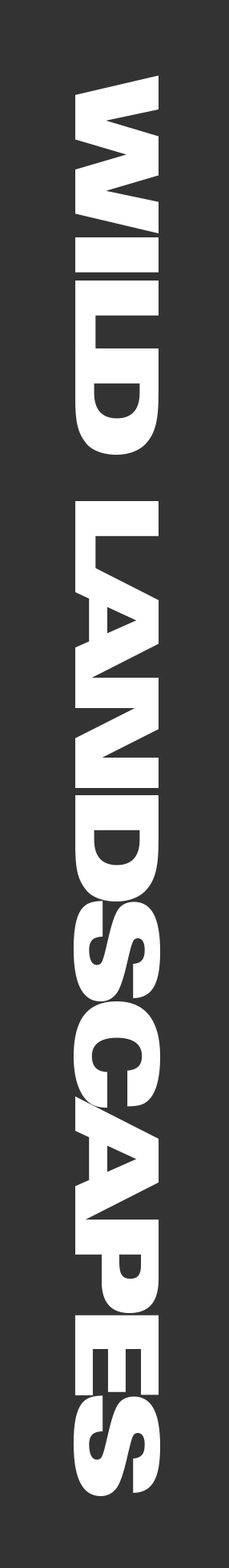
<style>
.page{position:relative;width:229px;height:1568px;background:#333333}
.page>*{position:absolute;margin:0}
.t1{font:115.1px "Univers-ExtraBlackExt";letter-spacing:-0.08em;color:#ffffff}
</style>
<div class="page">
<p class="t1" style="left:73px;top:75px;width:87px;height:1421px;rotate:90deg">WILD LANDSCAPES</p>
</div>
